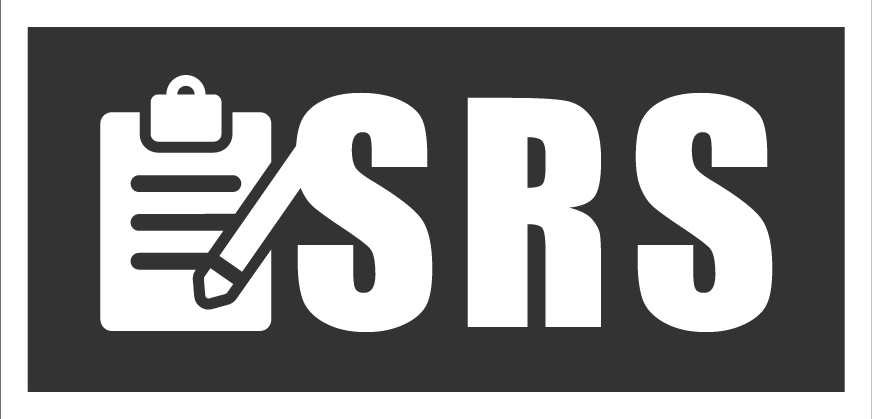
<style>
.page{position:relative;width:872px;height:419px;background:#333333}
.page>*{position:absolute;margin:0}
.t1{font:289.9px "Impact";letter-spacing:0.06em;color:#ffffff}
</style>
<div class="page">
<p class="t1" style="left:295px;top:92px;width:478px;height:240px">SRS</p>
</div>
